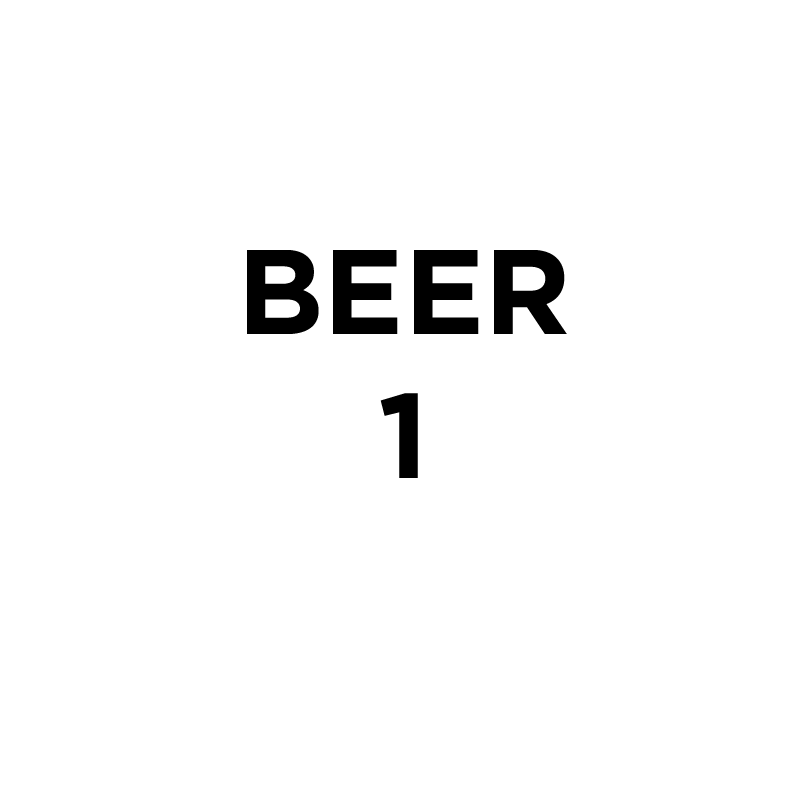
<style>
.page{position:relative;width:800px;height:800px;background:#ffffff}
.page>*{position:absolute;margin:0}
.t1{font:120px "Gotham-Bold";color:#000000}
</style>
<div class="page">
<p class="t1" style="left:247px;top:250px;width:320px;height:228px;text-align:center">BEER<br>1</p>
</div>
